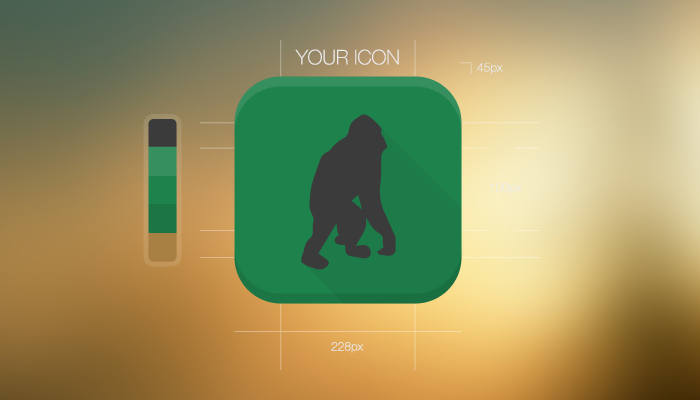
<style>
.page{position:relative;width:700px;height:400px}
.page>*{position:absolute;margin:0}
.t1{font:20px "HelveticaNeueLTStd-Th";color:#ebebeb;text-transform:uppercase}
.t2{font:12px "HelveticaNeueLTStd-Th";color:#ebebeb}
</style>
<div class="page">
<p class="t1" style="left:295px;top:49px;width:104px;height:16px">Your icon</p>
<p class="t2" style="left:477px;top:63px;width:26px;height:11px">45px</p>
<p class="t2" style="left:490px;top:183px;width:32px;height:11px">100px</p>
<p class="t2" style="left:331px;top:342px;width:33px;height:11px">228px</p>
</div>
